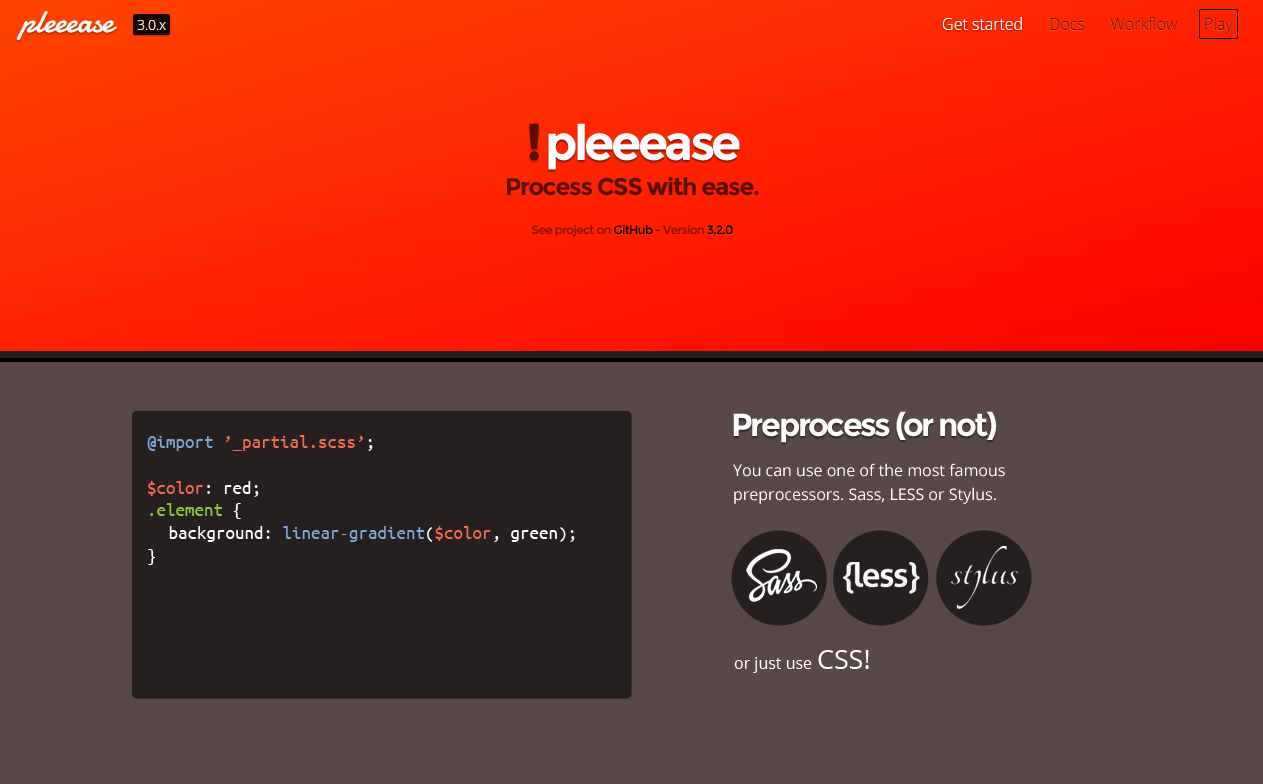
<style>
.page{position:relative;width:1263px;height:784px;background:#584847}
.page>*{position:absolute;margin:0}
.t1{font:52px "Montserrat-Bold";letter-spacing:-0.075em;color:#590e00}
.t2{font:49px "Montserrat-Bold";letter-spacing:-0.075em;color:#ffffff}
.t3{font:24px "Montserrat-Bold";letter-spacing:-0.05em;color:#590c00}
.t4{font:12px "Montserrat-Regular";letter-spacing:-0.05em}
.t5{font:32px "Montserrat-Bold";letter-spacing:-0.075em;color:#ffffff}
.t6{font:19px "UbuntuMono-Regular";color:#f26c4f}
.t7{font:19px "UbuntuMono-Regular";color:#7da7d9}
.t8{font:19px "UbuntuMono-Regular";color:#ffffff}
.t9{font:19px "UbuntuMono-Regular";color:#8dc63f}
.t10{font:16px/24px "OpenSans";color:#ffffff}
.t11{font:16px "OpenSans";color:#ffffff}
.t12{font:27px "OpenSans";color:#ffffff}
</style>
<div class="page">
<p class="t1" style="left:529px;top:123px;width:10px;height:38px">!</p>
<p class="t2" style="left:548px;top:123px;width:192px;height:47px">pleeease</p>
<p class="t3" style="left:507px;top:176px;width:252px;height:20px">Process CSS with ease.</p>
<p class="t4" style="left:532px;top:225px;width:201px;height:12px">See project on GitHub - Version 3.2.0</p>
<p class="t4" style="left:532px;top:225px;width:201px;height:12px">See project on GitHub - Version 3.2.0</p>
<p class="t5" style="left:733px;top:411px;width:264px;height:32px">Preprocess (or not)</p>
<p class="t6" style="left:147px;top:435px;width:428px;height:130px"><span class="t7">@import </span>’_partial.scss’<span class="t8">;<br><br></span>$color<span class="t8">: red;<br></span><span class="t9">.element</span><span class="t8"> {<br> background: </span><span class="t7">linear-gradient</span><span class="t8">(</span>$color<span class="t8">, green);<br>}</span></p>
<p class="t10" style="left:733px;top:463px;width:272px;height:41px">You can use one of the most famous <br>preprocessors. Sass, LESS or Stylus.</p>
<p class="t11" style="left:734px;top:650px;width:135px;height:23px">or just use <span class="t12">CSS!</span></p>
</div>
